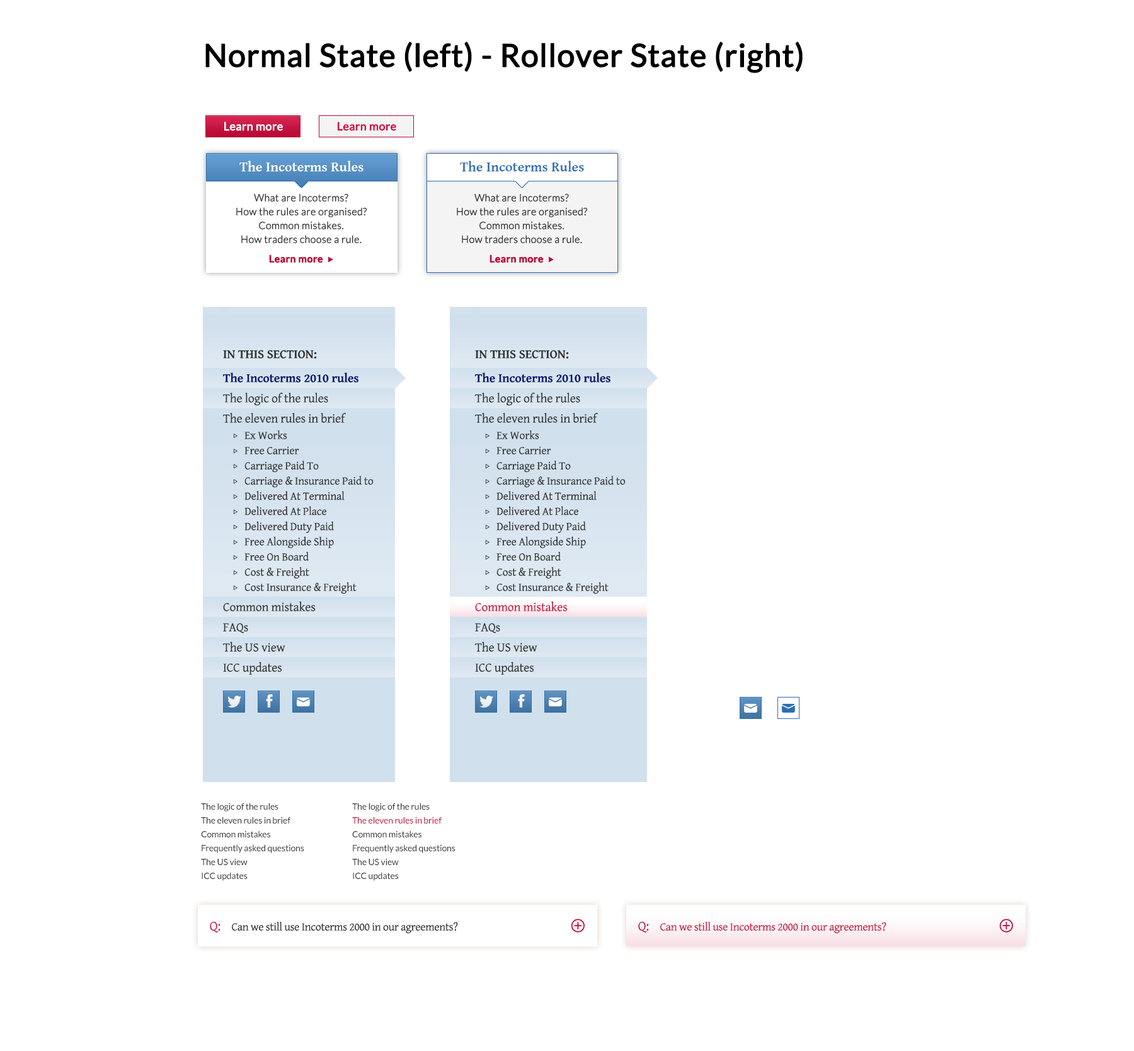
<style>
.page{position:relative;width:1134px;height:1051px;background:#ffffff}
.page>*{position:absolute;margin:0}
.t1{font:31.5px "Lato-Regular";color:#000000;font-weight:bold}
.t2{font:22.8px "GentiumBasic";color:#000000;font-weight:bold}
.t3{font:12.6px "Lato-Light";color:#000000;font-weight:bold}
.t4{font:11.3px "GentiumBasic";color:#000000;font-weight:bold}
.t5{font:11.3px "Lato-Regular";letter-spacing:-0.02em;color:#000000;font-weight:bold}
.t6{font:11.3px "Lato-Regular";letter-spacing:-0.02em;color:#000000;text-transform:uppercase;font-weight:bold}
.t7{font:11.3px "Lato-Regular";color:#ffffff;font-weight:bold}
.t8{font:22.8px "GentiumBasic";color:#ffffff;font-weight:bold}
.t9{font:12.6px "Lato-Light";color:#ffffff;font-weight:bold}
.t10{font:6.3px "Wingdings3";color:#ffffff;font-weight:bold}
.t11{font:11.3px "GentiumBasic";color:#ffffff;font-weight:bold}
.t12{font:11.3px "Lato-Regular";letter-spacing:-0.02em;color:#ffffff;font-weight:bold}
.t13{font:11.3px "Lato-Regular";letter-spacing:-0.02em;color:#ffffff;text-transform:uppercase;font-weight:bold}
.t14{font:11.3px "Lato-Regular";color:#d2073b;font-weight:bold}
.t15{font:22.8px "GentiumBasic";color:#d2073b;font-weight:bold}
.t16{font:12.6px "Lato-Light";color:#d2073b;font-weight:bold}
.t17{font:6.3px "Wingdings3";color:#d2073b;font-weight:bold}
.t18{font:11.3px "GentiumBasic";color:#d2073b;font-weight:bold}
.t19{font:11.3px "Lato-Regular";letter-spacing:-0.02em;color:#d2073b;font-weight:bold}
.t20{font:11.3px "Lato-Regular";letter-spacing:-0.02em;color:#d2073b;text-transform:uppercase;font-weight:bold}
.t21{font:13.9px "GentiumBasic-Bold";color:#ffffff}
.t22{font:13.9px "GentiumBasic-Bold";color:#2c6fb4}
.t23{font:10.1px/13.9px "Lato-Light";color:#333333;font-weight:bold}
.t24{font:10.1px/15.1px "Lato-Bold";color:#bc0937;font-weight:bold}
.t25{font:6.3px/16.4px "Wingdings3";color:#bc0937;font-weight:bold}
.t26{font:12.6px/20.2px "GentiumBasic";letter-spacing:-0.01em;color:#333333}
.t27{font:12.6px/20.2px "GentiumBasic-Bold";letter-spacing:-0.01em;color:#333333;text-transform:uppercase}
.t28{font:12.6px/24px "GentiumBasic-Bold";letter-spacing:-0.01em;color:#091770}
.t29{font:5.1px/16.5px "Wingdings3";color:#333333;font-weight:bold}
.t30{font:11.3px/15.1px "GentiumBasic";letter-spacing:-0.01em;color:#333333}
.t31{font:5.1px/15.2px "Wingdings3";color:#333333;font-weight:bold}
.t32{font:11.3px/13.9px "GentiumBasic";letter-spacing:-0.01em;color:#333333}
.t33{font:12.6px/20.2px "GentiumBasic";letter-spacing:-0.01em;color:#c61442}
.t34{font:8.8px/13.9px "Lato-Regular";letter-spacing:-0.01em;color:#333333}
.t35{font:8.8px/13.9px "Lato-Regular";letter-spacing:-0.01em;color:#bc0937}
.t36{font:11.3px "GentiumBasic";letter-spacing:-0.02em;color:#333333}
.t37{font:13.9px "GentiumBasic";letter-spacing:-0.02em;color:#c31c46}
.t38{font:11.3px "GentiumBasic";letter-spacing:-0.02em;color:#c31c46}
</style>
<div class="page">
<p class="t1" style="left:205px;top:42px;width:598px;height:31px"><span class="t2"><br></span><span class="t3"> <br><br></span>Normal State (left) - Rollover State (right)<br><span class="t4"><br></span><span class="t5"><br></span><span class="t6"></span></p>
<p class="t7" style="left:224px;top:122px;width:59px;height:9px"><span class="t8"><br></span><span class="t9"> <br><br></span>       Learn more<span class="t10"><br></span><span class="t11"><br></span><span class="t12"><br></span><span class="t13"></span></p>
<p class="t14" style="left:338px;top:122px;width:58px;height:9px"><span class="t15"><br></span><span class="t16"> <br><br></span>       Learn more<span class="t17"><br></span><span class="t18"><br></span><span class="t19"><br></span><span class="t20"></span></p>
<p class="t21" style="left:239px;top:161px;width:125px;height:10px">The Incoterms Rules</p>
<p class="t22" style="left:460px;top:161px;width:124px;height:10px">The Incoterms Rules</p>
<p class="t23" style="left:236px;top:193px;width:131px;height:70px;text-align:center">What are Incoterms? <br>How the rules are organised?<br>Common mistakes. <br>How traders choose a rule.<br><span class="t24">Learn more  </span><span class="t25">u</span></p>
<p class="t23" style="left:457px;top:193px;width:131px;height:70px;text-align:center">What are Incoterms? <br>How the rules are organised?<br>Common mistakes. <br>How traders choose a rule.<br><span class="t24">Learn more  </span><span class="t25">u</span></p>
<p class="t26" style="left:222px;top:350px;width:152px;height:325px"><span class="t27">In this section:<br></span><span class="t28">The Incoterms 2010 rules<br></span>The logic of the rules<br>The eleven rules in brief<br> <span class="t29">w   </span><span class="t30">Ex Works<br> </span><span class="t31">w   </span><span class="t32">Free Carrier<br> </span><span class="t31">w   </span><span class="t32">Carriage Paid To<br> </span><span class="t31">w   </span><span class="t32">Carriage &amp; Insurance Paid to<br> </span><span class="t31">w   </span><span class="t32">Delivered At Terminal<br> </span><span class="t31">w   </span><span class="t32">Delivered At Place<br> </span><span class="t31">w   </span><span class="t32">Delivered Duty Paid<br> </span><span class="t31">w   </span><span class="t32">Free Alongside Ship<br> </span><span class="t31">w   </span><span class="t32">Free On Board<br> </span><span class="t31">w   </span><span class="t32">Cost &amp; Freight<br> </span><span class="t31">w   </span><span class="t32">Cost Insurance &amp; Freight<br></span>Common mistakes <br>FAQs<br>The US view<br>ICC updates</p>
<p class="t32" style="left:475px;top:350px;width:151px;height:325px"><span class="t27">In this section:<br></span><span class="t28">The Incoterms 2010 rules<br></span><span class="t26">The logic of the rules<br></span><span class="t26">The eleven rules in brief<br> </span><span class="t29">w   </span><span class="t30">Ex Works<br> </span><span class="t31">w   </span>Free Carrier<br> <span class="t31">w   </span>Carriage Paid To<br> <span class="t31">w   </span>Carriage &amp; Insurance Paid to<br> <span class="t31">w   </span>Delivered At Terminal<br> <span class="t31">w   </span>Delivered At Place<br> <span class="t31">w   </span>Delivered Duty Paid<br> <span class="t31">w   </span>Free Alongside Ship<br> <span class="t31">w   </span>Free On Board<br> <span class="t31">w   </span>Cost &amp; Freight<br> <span class="t31">w   </span>Cost Insurance &amp; Freight<br><span class="t33">Common mistakes <br></span><span class="t26">FAQs<br>The US view<br>ICC updates</span></p>
<p class="t34" style="left:201px;top:803px;width:103px;height:78px">The logic of the rules<br>The eleven rules in brief<br>Common mistakes<br>Frequently asked questions<br>The US view<br>ICC updates</p>
<p class="t34" style="left:352px;top:803px;width:104px;height:78px">The logic of the rules<br><span class="t35">The eleven rules in brief<br></span>Common mistakes<br>Frequently asked questions<br>The US view<br>ICC updates</p>
<p class="t36" style="left:210px;top:921px;width:248px;height:13px"><span class="t37">Q:    </span>Can we still use Incoterms 2000 in our agreements?</p>
<p class="t38" style="left:638px;top:921px;width:249px;height:13px"><span class="t37">Q:    </span>Can we still use Incoterms 2000 in our agreements?</p>
</div>
